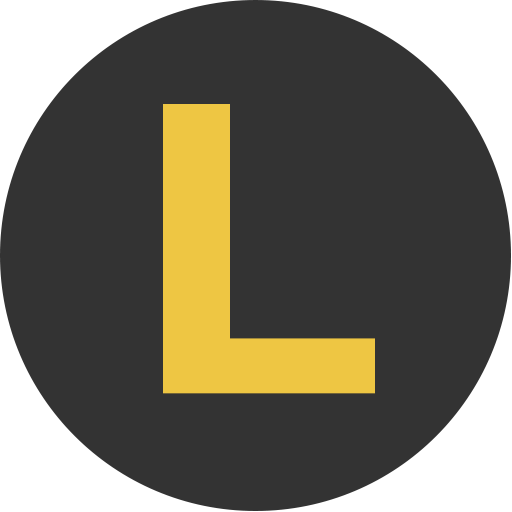
<style>
.page{position:relative;width:512px;height:512px;background:#333333}
.page>*{position:absolute;margin:0}
.t1{font:413px "Montserrat-Bold";color:#eec643}
</style>
<div class="page">
<p class="t1" style="left:163px;top:104px;width:212px;height:290px">L</p>
</div>
